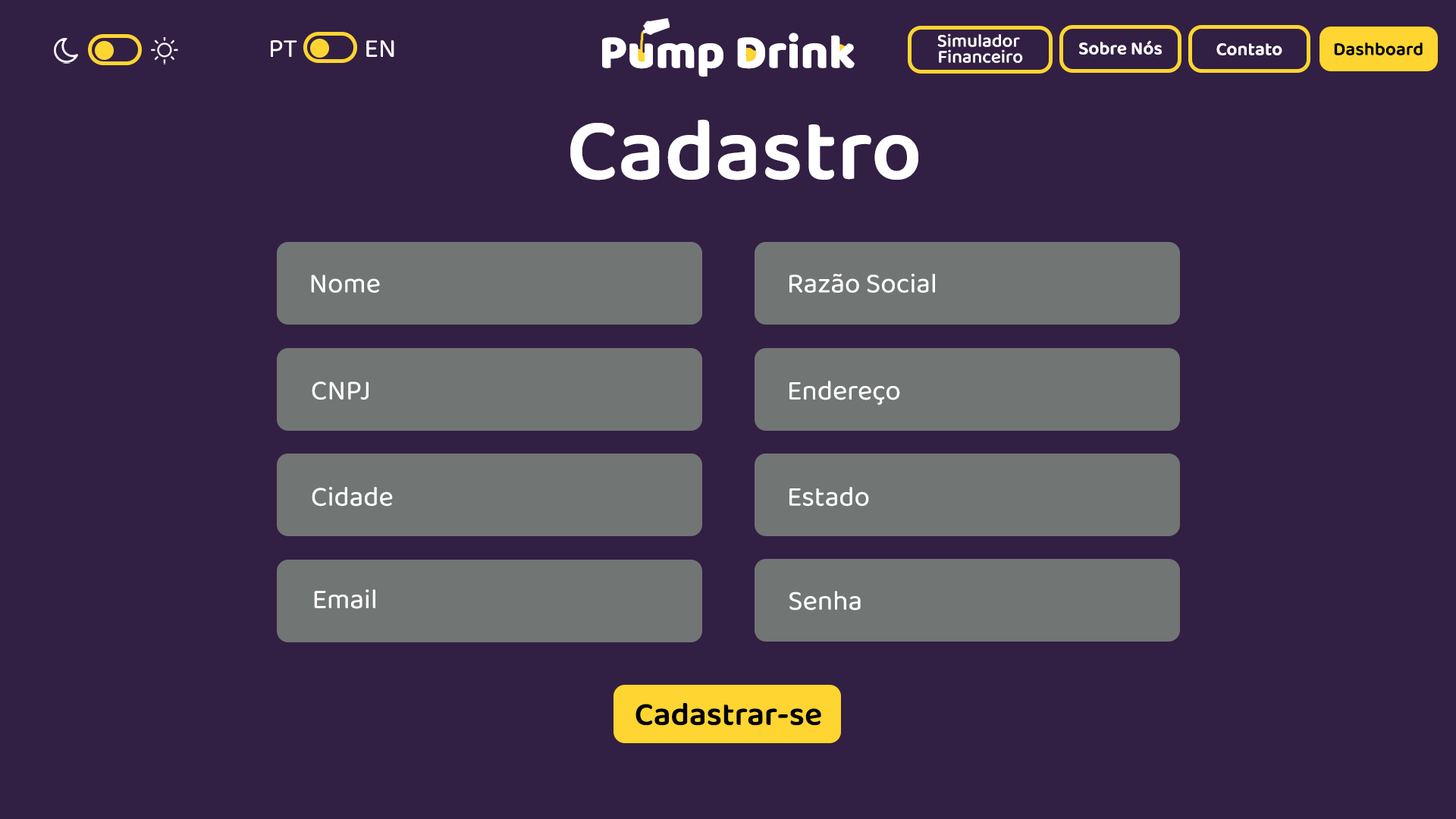
<style>
.page{position:relative;width:1456px;height:819px;background:#321f44}
.page>*{position:absolute;margin:0}
.t1{font:26.5px "Baloo2-Regular";color:#ffffff}
.t2{font:48.4px "Baloo2-ExtraBold";color:#ffffff}
.t3{font:18.6px/15.9px "Baloo2-Medium";color:#ffffff}
.t4{font:18.6px "Baloo2-SemiBold";color:#ffffff}
.t5{font:18.7px "Baloo2-SemiBold";color:#ffffff}
.t6{font:18.7px "Baloo2-SemiBold";color:#000000}
.t7{font:89.1px "Baloo2-SemiBold";color:#ffffff}
.t8{font:28.1px "Baloo2-Regular";color:#ffffff}
.t9{font:32.9px "Baloo2-SemiBold";color:#000000}
</style>
<div class="page">
<p class="t1" style="left:271px;top:40px;width:26px;height:17px">PT</p>
<p class="t1" style="left:366px;top:40px;width:28px;height:18px">EN</p>
<p class="t2" style="left:602px;top:33px;width:253px;height:44px">Pump Drink</p>
<p class="t3" style="left:937px;top:33px;width:86px;height:30px;text-align:center">Simulador <br>Financeiro</p>
<p class="t4" style="left:1079px;top:40px;width:83px;height:15px">Sobre Nós</p>
<p class="t5" style="left:1216px;top:43px;width:66px;height:12px">Contato</p>
<p class="t6" style="left:1334px;top:42px;width:89px;height:13px">Dashboard</p>
<p class="t7" style="left:570px;top:119px;width:348px;height:61px">Cadastro</p>
<p class="t8" style="left:311px;top:275px;width:69px;height:18px">Nome</p>
<p class="t8" style="left:789px;top:273px;width:146px;height:20px">Razão Social</p>
<p class="t8" style="left:312px;top:381px;width:57px;height:19px">CNPJ</p>
<p class="t8" style="left:789px;top:381px;width:111px;height:24px">Endereço</p>
<p class="t8" style="left:312px;top:487px;width:81px;height:20px">Cidade</p>
<p class="t8" style="left:789px;top:487px;width:80px;height:20px">Estado</p>
<p class="t8" style="left:314px;top:589px;width:61px;height:20px">Email</p>
<p class="t8" style="left:789px;top:591px;width:72px;height:19px">Senha</p>
<p class="t9" style="left:635px;top:703px;width:186px;height:23px">Cadastrar-se</p>
</div>
